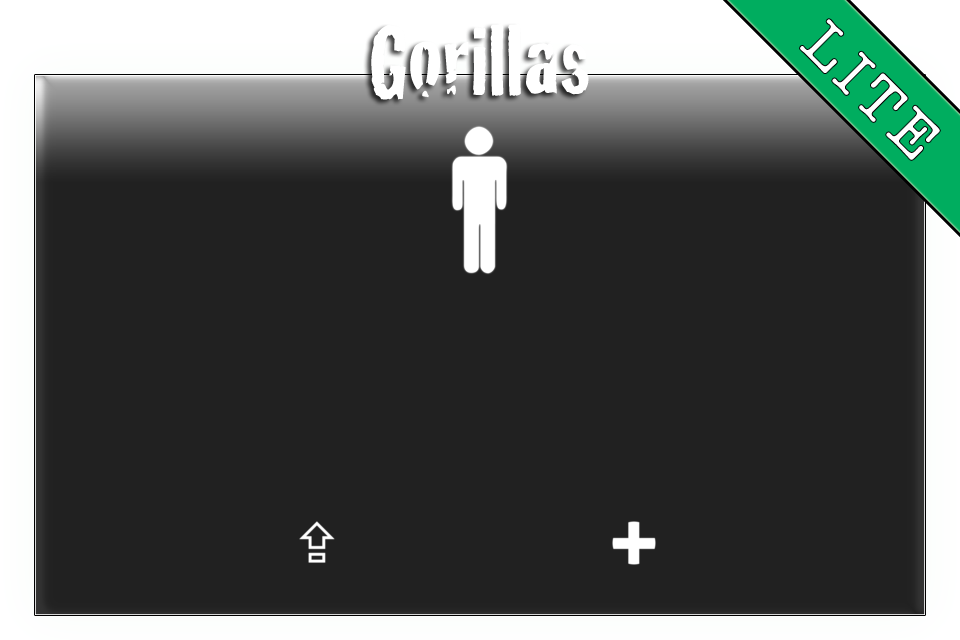
<style>
.page{position:relative;width:960px;height:640px;background:#212121}
.page>*{position:absolute;margin:0}
.t1{font:100px "Cracked";color:#ffffff}
.t2{font:62.4px "AmericanTypewriter";letter-spacing:0.1em;color:#ffffff}
</style>
<div class="page">
<p class="t1" style="left:371px;top:23px;width:218px;height:77px">Gorillas</p>
<p class="t2" style="left:800px;top:19px;width:140px;height:141px;rotate:45deg">LITE</p>
</div>
